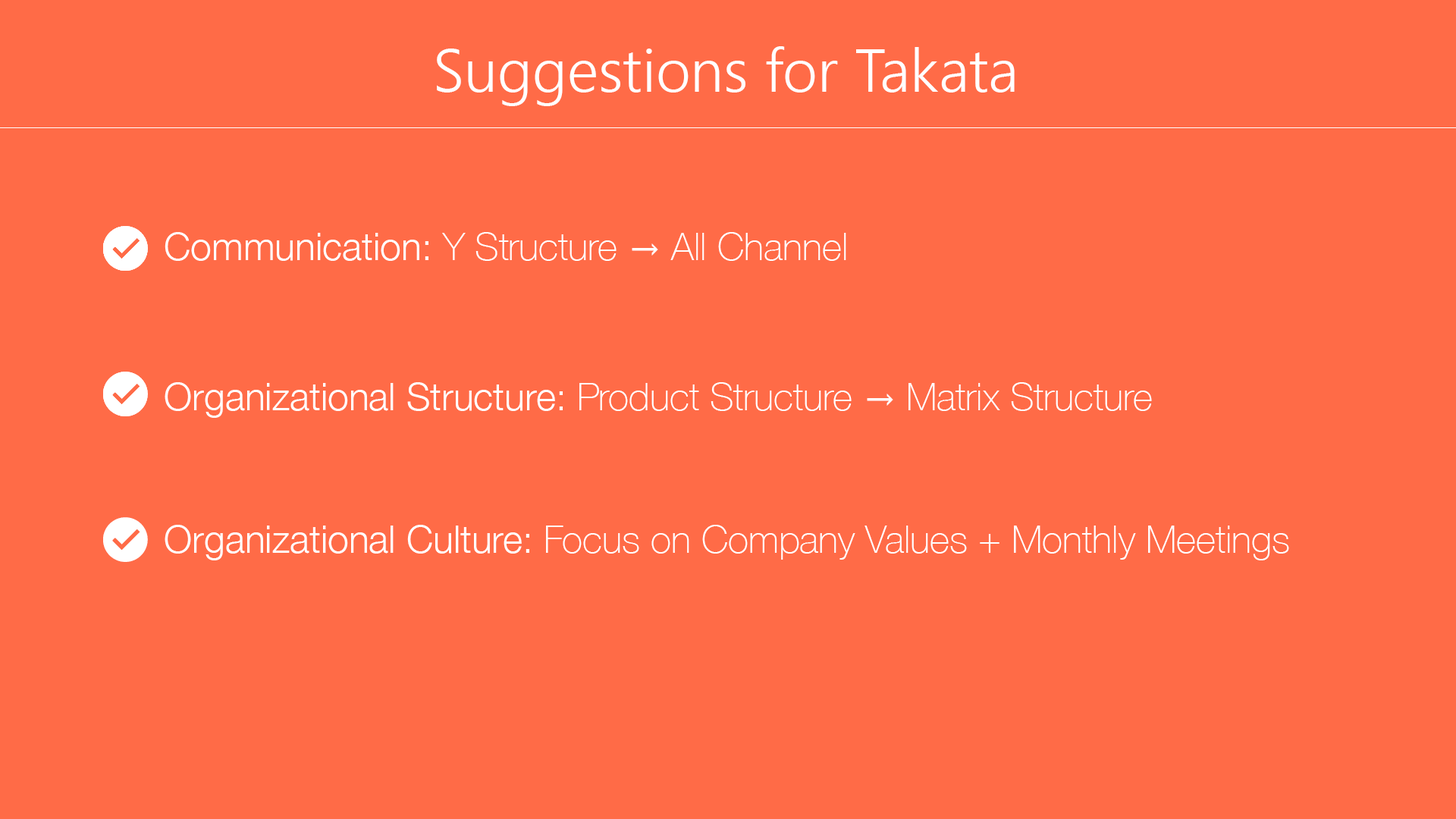
<style>
.page{position:relative;width:1456px;height:819px;background:#ff6b47}
.page>*{position:absolute;margin:0}
.t1{font:60.7px "SegoeUI-Semilight";color:#ffffff}
.t2{font:43.2px "SegoeUI-Semilight";color:#ffffff}
.t3{font:37.9px "HelveticaNeue-Light";color:#ffffff}
.t4{font:37.9px "HelveticaNeue-Thin";color:#ffffff}
.t5{font:37.9px "SegoeUI-Semilight";color:#ffffff}
</style>
<div class="page">
<p class="t1" style="left:437px;top:46px;width:578px;height:60px"><span class="t2"><br></span><br><br>Suggestions for Takata</p>
<p class="t3" style="left:165px;top:232px;width:681px;height:29px">Communication:<span class="t4"> Y Structure </span><span class="t5">→ </span><span class="t4">All Channel</span></p>
<p class="t3" style="left:165px;top:382px;width:987px;height:36px">Organizational Structure:<span class="t4"> Product Structure </span><span class="t5">→ </span><span class="t4">Matrix Structure</span></p>
<p class="t4" style="left:165px;top:525px;width:1124px;height:35px"><span class="t3">Organizational Culture: </span>Focus on Company Values + Monthly Meetings</p>
</div>
